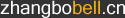
<style>
.page{position:relative;width:125px;height:18px;background:#333333}
.page>*{position:absolute;margin:0}
.t1{font:18px "Kartika";color:#ffffff}
.t2{font:18px "Kartika";color:#eeb111}
</style>
<div class="page">
<p class="t1" style="left:0px;top:0px;width:125px;height:18px">zhangbo<span class="t2">bell</span>.cn</p>
</div>
